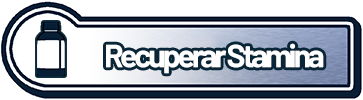
<style>
.page{position:relative;width:363px;height:100px;background:#ffffff}
.page>*{position:absolute;margin:0}
.t1{font:32px "Barlow-Bold";letter-spacing:-0.1em;color:#ffffff}
</style>
<div class="page">
<p class="t1" style="left:106px;top:43px;width:218px;height:31px">Recuperar Stamina</p>
</div>
